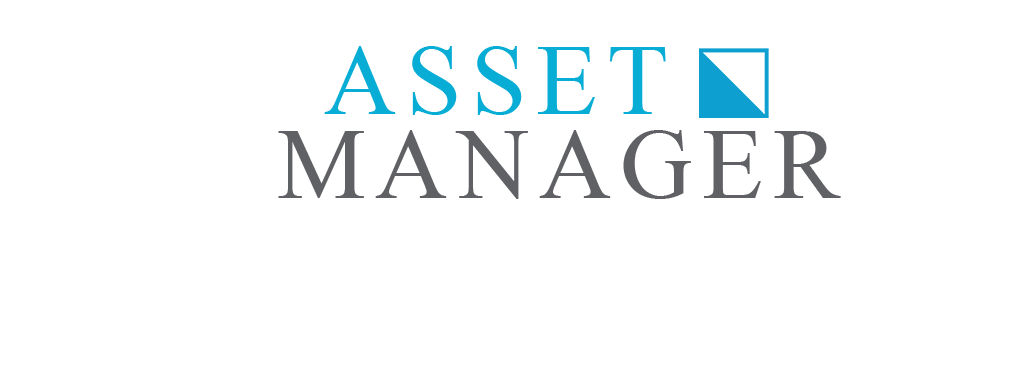
<style>
.page{position:relative;width:1012px;height:384px;background:#ffffff}
.page>*{position:absolute;margin:0}
.t1{font:100px "TimesNewRomanPSMT";letter-spacing:0.06em;color:#08add6;text-transform:uppercase}
.t2{font:100px "TimesNewRomanPSMT";letter-spacing:0.06em;color:#606164;text-transform:uppercase}
</style>
<div class="page">
<p class="t1" style="left:324px;top:46px;width:342px;height:69px">asset</p>
<p class="t2" style="left:278px;top:130px;width:563px;height:69px">Manager</p>
</div>
